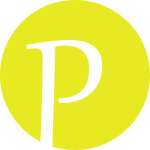
<style>
.page{position:relative;width:150px;height:150px;background:#e7ea22}
.page>*{position:absolute;margin:0}
.t1{font:193.8px "Gabriola";color:#ffffff}
</style>
<div class="page">
<p class="t1" style="left:26px;top:40px;width:77px;height:112px">P</p>
</div>
